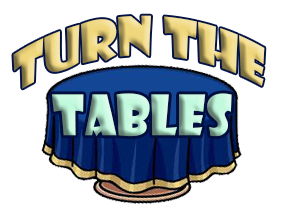
<style>
.page{position:relative;width:285px;height:220px;background:#ffffff}
.page>*{position:absolute;margin:0}
.t1{font:52.5px "ShowcardGothic-Reg"}
.t2{font:54.3px "ShowcardGothic-Reg";color:#c1f9dd;scale:0.97 1}
</style>
<div class="page">
<p class="t1" style="left:13px;top:15px;width:252px;height:74px">Turn The</p>
<p class="t2" style="left:51px;top:93px;width:181px;height:44px">Tables</p>
</div>
